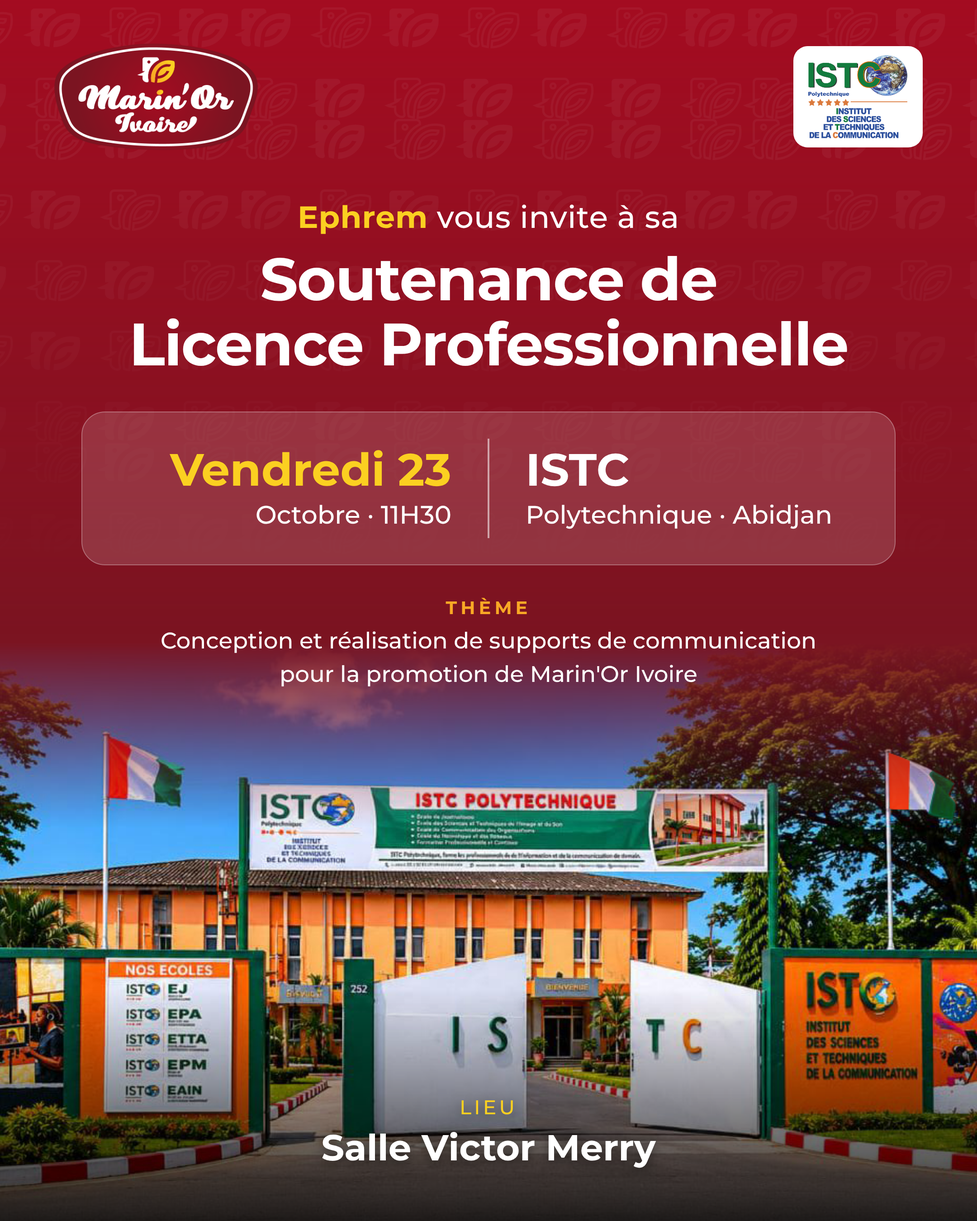
<style>
.page{position:relative;width:977px;height:1221px}
.page>*{position:absolute;margin:0}
.t1{font:30.7px "Montserrat-Medium";letter-spacing:0.015em;color:#ffffff}
.t2{font:30.7px "Montserrat-Bold";letter-spacing:0.015em;color:#fbd021}
.t3{font:59.7px/64.5px "Montserrat-Bold";letter-spacing:-0.015em;color:#ffffff}
.t4{font:45.2px "Montserrat-Bold";color:#fbd021}
.t5{font:45.2px "Montserrat-Bold";color:#ffffff}
.t6{font:25.3px "Montserrat-Medium";color:#ffffff}
.t7{font:18.1px "Montserrat-Bold";letter-spacing:0.2em;color:#f9a825}
.t8{font:22.6px/32.8px "Montserrat-Medium";color:#ffffff}
.t9{font:19.9px "Montserrat-Medium";letter-spacing:0.136em;color:#fbd021}
.t10{font:36.2px "Montserrat-Bold";color:#ffffff}
</style>
<div class="page">
<p class="t1" style="left:300px;top:204px;width:376px;height:30px"><span class="t2">Ephrem</span> vous invite à sa</p>
<p class="t3" style="left:134px;top:256px;width:713px;height:110px;text-align:center">Soutenance de<br>Licence Professionnelle</p>
<p class="t4" style="left:170px;top:450px;width:280px;height:37px">Vendredi 23</p>
<p class="t5" style="left:529px;top:453px;width:100px;height:34px">ISTC</p>
<p class="t6" style="left:256px;top:505px;width:194px;height:19px">Octobre · 11H30</p>
<p class="t6" style="left:528px;top:504px;width:302px;height:25px">Polytechnique · Abidjan</p>
<p class="t7" style="left:445px;top:598px;width:82px;height:16px">THÈME</p>
<p class="t8" style="left:161px;top:631px;width:653px;height:55px;text-align:center">Conception et réalisation de supports de communication<br>pour la promotion de Marin'Or Ivoire</p>
<p class="t9" style="left:461px;top:1100px;width:52px;height:15px">LIEU</p>
<p class="t10" style="left:322px;top:1132px;width:334px;height:36px">Salle Victor Merry</p>
</div>
